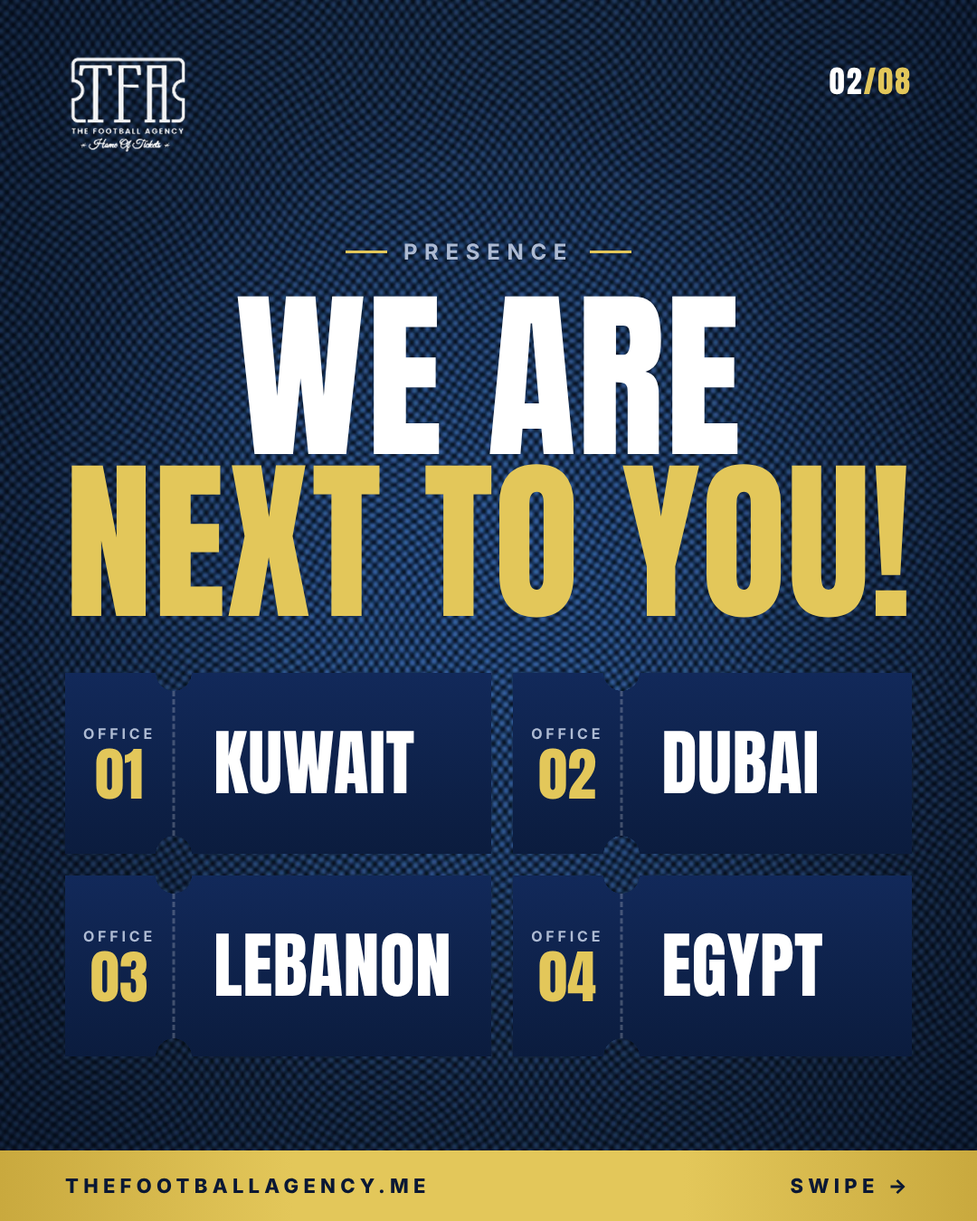
<style>
.page{position:relative;width:977px;height:1221px}
.page>*{position:absolute;margin:0}
.t1{font:30.7px "Anton-Regular";letter-spacing:0.06em;color:#e3c75a}
.t2{font:30.7px "Anton-Regular";letter-spacing:0.06em;color:#ffffff}
.t3{font:21.7px "Inter-Bold";letter-spacing:0.32em;color:#aebbd3}
.t4{font:183.4px "Anton-Regular";letter-spacing:0.005em;color:#ffffff}
.t5{font:175.1px "Anton-Regular";letter-spacing:0.005em;color:#e3c75a}
.t6{font:14.5px "Inter-Bold";letter-spacing:0.24em;color:#aebbd3}
.t7{font:72.3px "Anton-Regular";letter-spacing:0.005em;color:#ffffff}
.t8{font:57.9px "Anton-Regular";letter-spacing:0.005em;color:#e3c75a}
.t9{font:19.9px "Inter-ExtraBold";letter-spacing:0.24em;color:#0a1834}
</style>
<div class="page">
<p class="t1" style="left:829px;top:67px;width:81px;height:28px"><span class="t2">02</span>/08</p>
<p class="t3" style="left:404px;top:243px;width:162px;height:17px">PRESENCE</p>
<p class="t4" style="left:237px;top:296px;width:501px;height:158px">WE ARE</p>
<p class="t5" style="left:71px;top:464px;width:835px;height:154px">NEXT TO YOU!</p>
<p class="t6" style="left:83px;top:728px;width:69px;height:12px">OFFICE</p>
<p class="t7" style="left:216px;top:731px;width:198px;height:63px">KUWAIT</p>
<p class="t6" style="left:531px;top:728px;width:69px;height:12px">OFFICE</p>
<p class="t7" style="left:664px;top:731px;width:153px;height:63px">DUBAI</p>
<p class="t8" style="left:96px;top:748px;width:46px;height:51px">01</p>
<p class="t8" style="left:539px;top:748px;width:57px;height:51px">02</p>
<p class="t6" style="left:83px;top:931px;width:69px;height:11px">OFFICE</p>
<p class="t7" style="left:216px;top:932px;width:233px;height:65px">LEBANON</p>
<p class="t6" style="left:531px;top:931px;width:69px;height:11px">OFFICE</p>
<p class="t7" style="left:664px;top:932px;width:158px;height:65px">EGYPT</p>
<p class="t8" style="left:91px;top:950px;width:56px;height:52px">03</p>
<p class="t8" style="left:539px;top:950px;width:57px;height:52px">04</p>
<p class="t9" style="left:65px;top:1177px;width:360px;height:17px">THEFOOTBALLAGENCY.ME</p>
<p class="t9" style="left:790px;top:1177px;width:115px;height:17px">SWIPE →</p>
</div>
